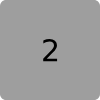
<style>
.page{position:relative;width:100px;height:100px;background:#9e9e9e}
.page>*{position:absolute;margin:0}
.t1{font:30px "DejaVuSans";color:#000000}
</style>
<div class="page">
<p class="t1" style="left:43px;top:38px;width:15px;height:24px">2</p>
</div>
